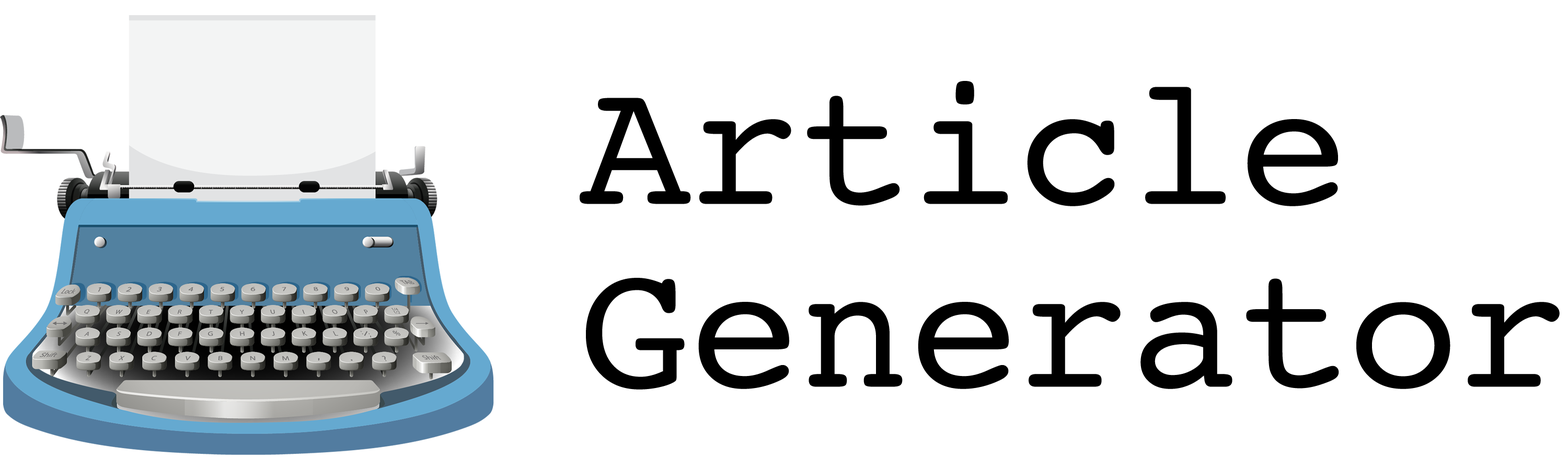
<style>
.page{position:relative;width:1568px;height:470px;background:#ffffff}
.page>*{position:absolute;margin:0}
.t1{font:182.9px/182.9px "Courier";color:#000000}
</style>
<div class="page">
<p class="t1" style="left:580px;top:81px;width:980px;height:309px">Article<br>Generator</p>
</div>
